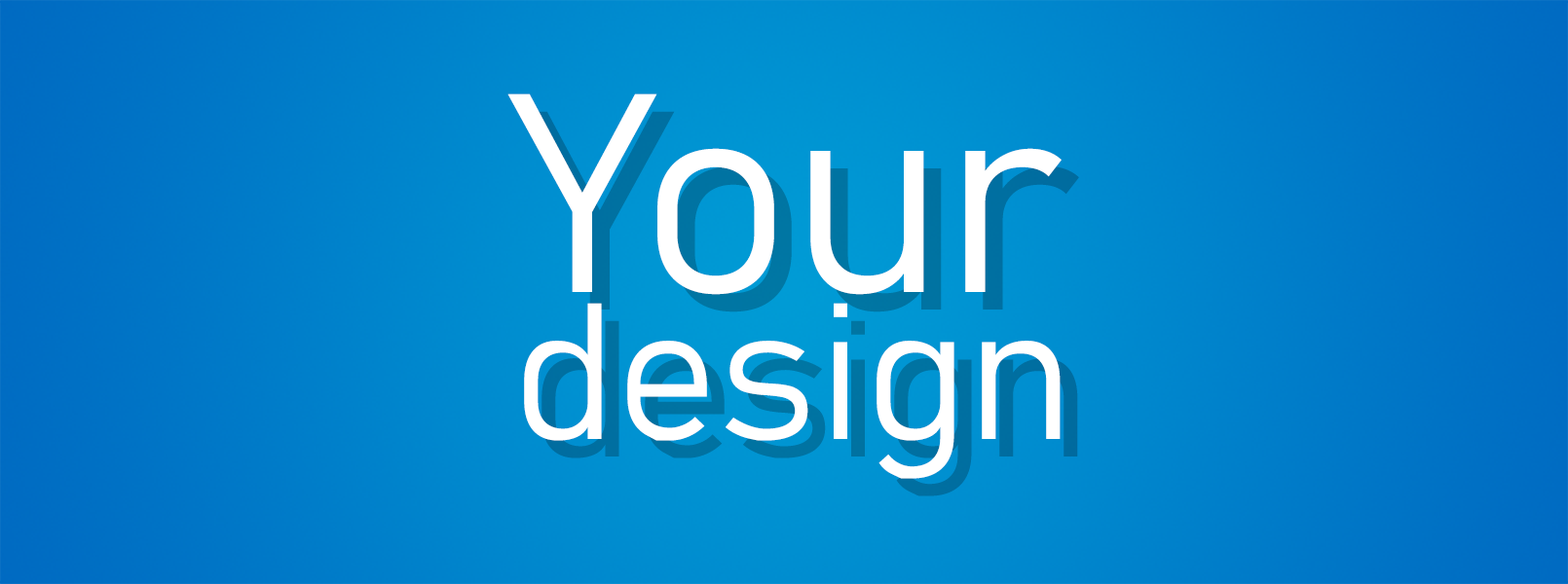
<style>
.page{position:relative;width:1568px;height:584px}
.page>*{position:absolute;margin:0}
.t1{font:190.9px "Bahnschrift-Light";color:#ffffff}
.t2{font:278.5px "Bahnschrift-Light";color:#ffffff}
</style>
<div class="page">
<p class="t1" style="left:507px;top:93px;width:555px;height:386px"><span class="t2">Your<br></span>design</p>
</div>
